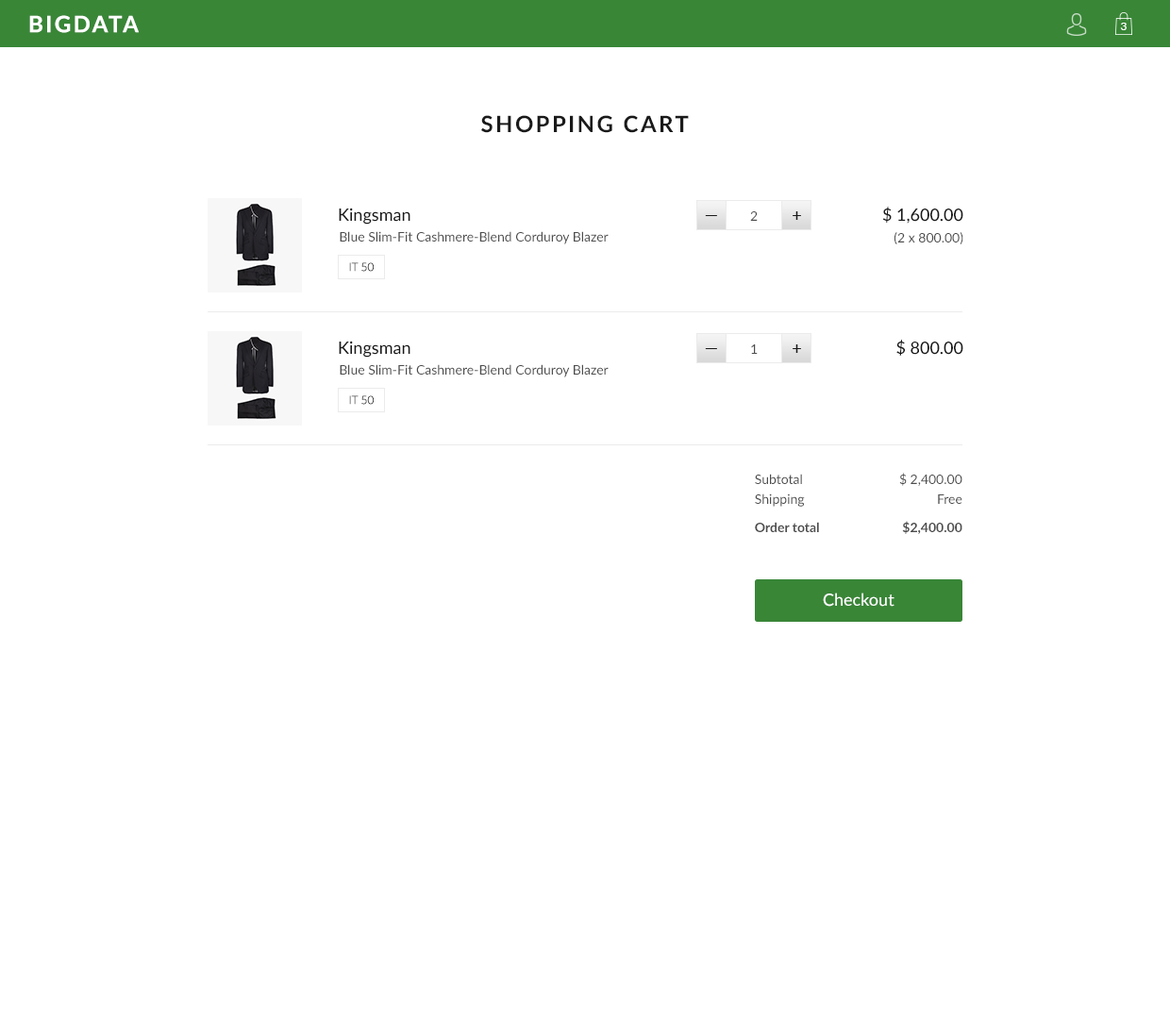
<style>
.page{position:relative;width:1170px;height:1019px;background:#ffffff}
.page>*{position:absolute;margin:0}
.t1{font:22.6px "Lato-Bold";letter-spacing:0.1em;color:#ffffff}
.t2{font:11.3px "Lato-Regular";letter-spacing:0.1em;color:#ffffff}
.t3{font:22.6px "Lato-Bold";letter-spacing:0.1em;color:#1a1a1a;text-transform:uppercase}
.t4{font:17px "Lato-Medium";color:#1a1a1a}
.t5{font:13.2px "Lato-Regular";color:#4d4d4d}
.t6{font:11.3px "Lato-Light";color:#353535}
.t7{font:13.2px/19.8px "Lato-Regular";color:#4d4d4d}
.t8{font:13.2px/19.8px "Lato-Bold";color:#4d4d4d}
.t9{font:17px "Lato-Medium";color:#ffffff}
</style>
<div class="page">
<p class="t1" style="left:29px;top:15px;width:110px;height:18px">BIGDATA</p>
<p class="t2" style="left:1120px;top:23px;width:7px;height:7px">3</p>
<p class="t3" style="left:481px;top:115px;width:208px;height:18px">Shopping Cart</p>
<p class="t4" style="left:339px;top:208px;width:71px;height:17px">Kingsman</p>
<p class="t5" style="left:882px;top:207px;width:81px;height:37px;text-align:right"><span class="t4">$ 1,600.00<br></span>(2 x 800.00)</p>
<p class="t4" style="left:705px;top:215px;width:12px;height:1px">—</p>
<p class="t5" style="left:750px;top:211px;width:8px;height:10px">2</p>
<p class="t4" style="left:793px;top:211px;width:8px;height:9px">+</p>
<p class="t5" style="left:340px;top:231px;width:269px;height:13px">Blue Slim-Fit Cashmere-Blend Corduroy Blazer</p>
<p class="t6" style="left:349px;top:262px;width:25px;height:10px">IT 50</p>
<p class="t4" style="left:339px;top:341px;width:71px;height:17px">Kingsman</p>
<p class="t4" style="left:896px;top:340px;width:67px;height:16px">$ 800.00</p>
<p class="t4" style="left:705px;top:348px;width:12px;height:1px">—</p>
<p class="t5" style="left:751px;top:344px;width:7px;height:10px">1</p>
<p class="t4" style="left:793px;top:344px;width:8px;height:9px">+</p>
<p class="t5" style="left:340px;top:364px;width:269px;height:13px">Blue Slim-Fit Cashmere-Blend Corduroy Blazer</p>
<p class="t6" style="left:349px;top:395px;width:25px;height:10px">IT 50</p>
<p class="t7" style="left:755px;top:474px;width:64px;height:58px">Subtotal<br>Shipping<br><span class="t8">Order total</span></p>
<p class="t7" style="left:899px;top:473px;width:63px;height:61px;text-align:right">$ 2,400.00<br>Free<br><span class="t8">$2,400.00</span></p>
<p class="t9" style="left:823px;top:593px;width:72px;height:14px">Checkout</p>
</div>
